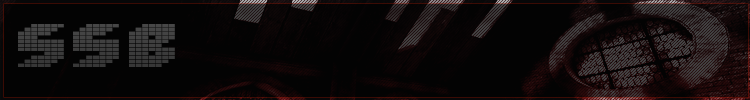
<style>
.page{position:relative;width:750px;height:100px;background:#030303}
.page>*{position:absolute;margin:0}
.t1{font:75px "Loudnoise";color:#3f3f3f}
</style>
<div class="page">
<p class="t1" style="left:18px;top:24px;width:157px;height:43px">ssb</p>
</div>
